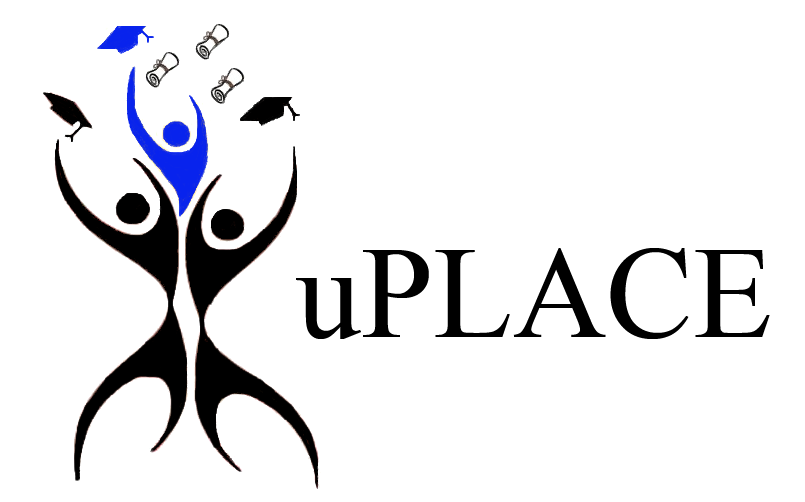
<style>
.page{position:relative;width:805px;height:502px;background:#ffffff}
.page>*{position:absolute;margin:0}
.t1{font:130px "TimesNewRomanPSMT";color:#000000}
</style>
<div class="page">
<p class="t1" style="left:296px;top:248px;width:474px;height:91px">uPLACE</p>
</div>
